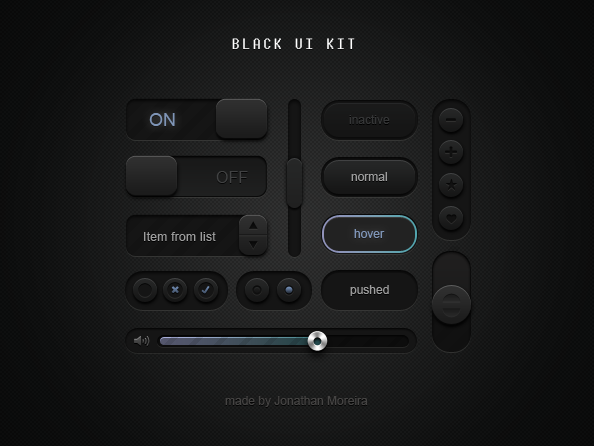
<style>
.page{position:relative;width:594px;height:446px}
.page>*{position:absolute;margin:0}
.t1{font:18px "ArialMT";color:#7f95b7}
.t2{font:12px "ArialMT";color:#353637}
.t3{font:16px "ArialMT";color:#414243}
.t4{font:12px "ArialMT";color:#9d9d9d}
.t5{font:12px "ArialMT";letter-spacing:0.025em;color:#9d9d9d}
.t6{font:12px "ArialMT";color:#7f95b7}
.t7{font:12px "ArialMT";color:#434545}
</style>
<div class="page">
<p class="t1" style="left:149px;top:113px;width:26px;height:13px">ON</p>
<p class="t2" style="left:349px;top:115px;width:41px;height:9px">inactive</p>
<p class="t3" style="left:216px;top:171px;width:32px;height:12px">OFF</p>
<p class="t4" style="left:351px;top:172px;width:36px;height:9px">normal</p>
<p class="t5" style="left:144px;top:232px;width:72px;height:9px">Item from list</p>
<p class="t6" style="left:354px;top:229px;width:31px;height:9px">hover</p>
<p class="t4" style="left:350px;top:285px;width:39px;height:11px">pushed</p>
<p class="t7" style="left:225px;top:396px;width:143px;height:11px">made by Jonathan Moreira</p>
</div>
